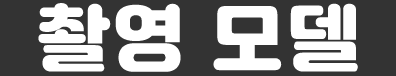
<style>
.page{position:relative;width:396px;height:76px;background:#333333}
.page>*{position:absolute;margin:0}
.t1{font:72px "Jalnan";letter-spacing:0.05em;color:#ffffff;text-transform:uppercase}
</style>
<div class="page">
<p class="t1" style="left:38px;top:3px;width:320px;height:69px">촬영 모델</p>
</div>
